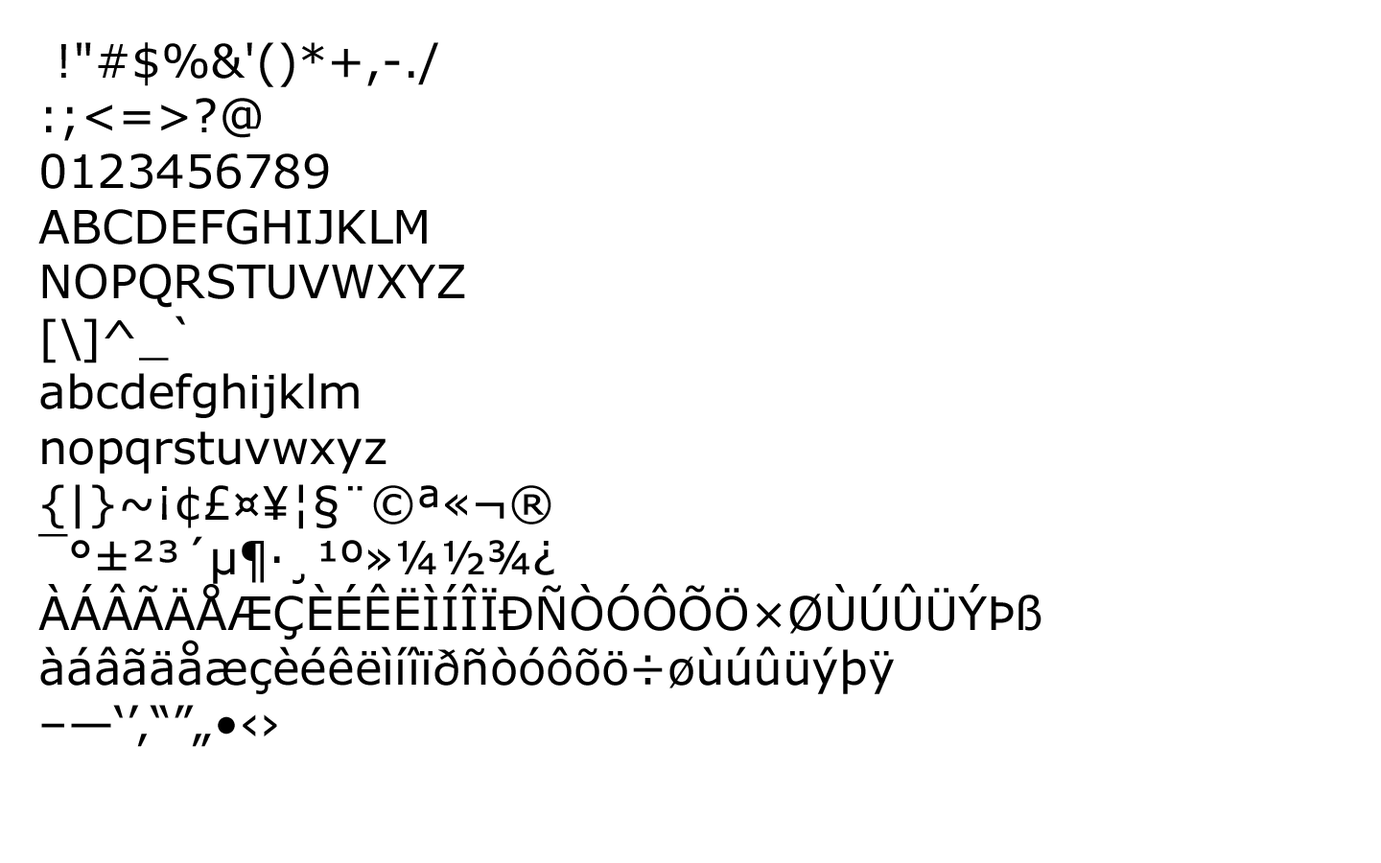
<style>
.page{position:relative;width:1381px;height:863px;background:#ffffff}
.page>*{position:absolute;margin:0}
.t1{font:46px "Verdana";color:#000000}
</style>
<div class="page">
<p class="t1" style="left:38px;top:42px;width:1004px;height:705px">!"#$%&amp;'()*+,-./<br>:;&lt;=&gt;?@<br>0123456789<br>ABCDEFGHIJKLM<br>NOPQRSTUVWXYZ<br>[\]^_`<br>abcdefghijklm<br>nopqrstuvwxyz<br>{|}~¡¢£¤¥¦§¨©ª«¬®<br>¯°±²³´µ¶·¸¹º»¼½¾¿<br>ÀÁÂÃÄÅÆÇÈÉÊËÌÍÎÏÐÑÒÓÔÕÖ×ØÙÚÛÜÝÞß<br>àáâãäåæçèéêëìíîïðñòóôõö÷øùúûüýþÿ<br>–—‘’‚“”„•‹›</p>
</div>
